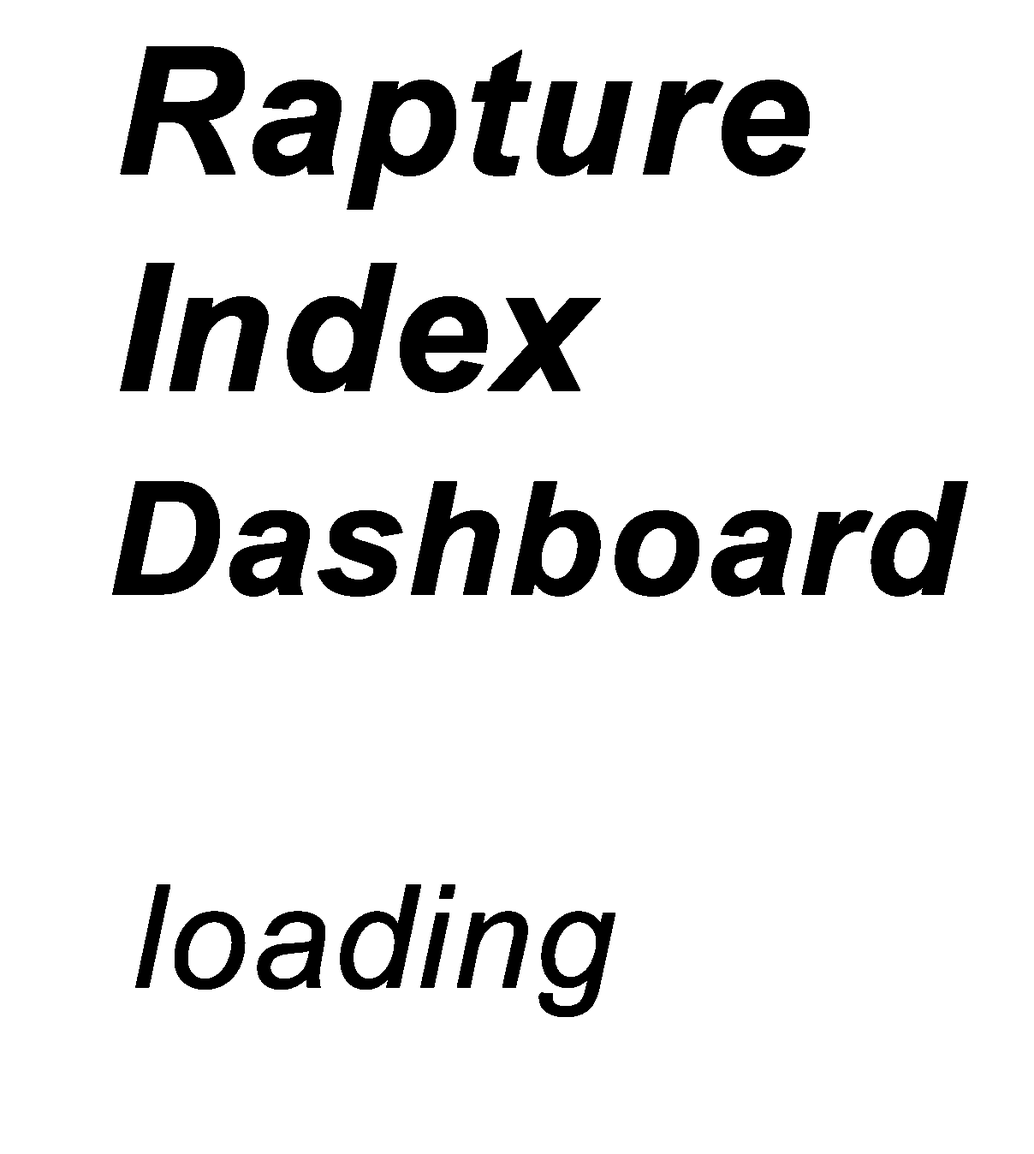
<style>
.page{position:relative;width:1034px;height:1154px;background:#ffffff}
.page>*{position:absolute;margin:0}
.t1{font:176.4px "Arial-BoldItalicMT";color:#000000;font-weight:bold}
.t2{font:156.2px "Arial-BoldItalicMT";color:#000000;font-weight:bold}
.t3{font:142.1px "Arial-ItalicMT";color:#000000;font-weight:bold}
</style>
<div class="page">
<p class="t1" style="left:120px;top:46px;width:690px;height:164px">Rapture</p>
<p class="t1" style="left:120px;top:263px;width:481px;height:130px">Index</p>
<p class="t2" style="left:112px;top:481px;width:856px;height:115px">Dashboard</p>
<p class="t3" style="left:135px;top:884px;width:480px;height:133px">loading</p>
</div>
